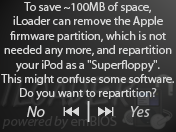
<style>
.page{position:relative;width:176px;height:132px}
.page>*{position:absolute;margin:0}
.t1{font:12px "MyriadPro-Regular";color:#d8d8d8}
.t2{font:12px "ArialMT";color:#d8d8d8}
.t3{font:16px "MyriadPro-It";color:#d8d8d8}
.t4{font:14px "MyriadPro-It";color:#3d3d3c}
.t5{font:14px "MyriadPro-Regular";color:#3d3d3c}
</style>
<div class="page">
<p class="t1" style="left:1px;top:2px;width:173px;height:115px;text-align:center">To save ~100MB of space,<br>iLoader can remove the Apple<br>firmware partition, which is not<br>needed any more, and repartition<br>your iPod as a <span class="t2">"</span>Superfloppy<span class="t2">"</span>.<br>This might confuse some software.<br>Do you want to repartition?<br><span class="t3">No                             Yes</span></p>
<p class="t4" style="left:2px;top:116px;width:115px;height:13px">powered by<span class="t5"> emBIOS</span></p>
</div>
